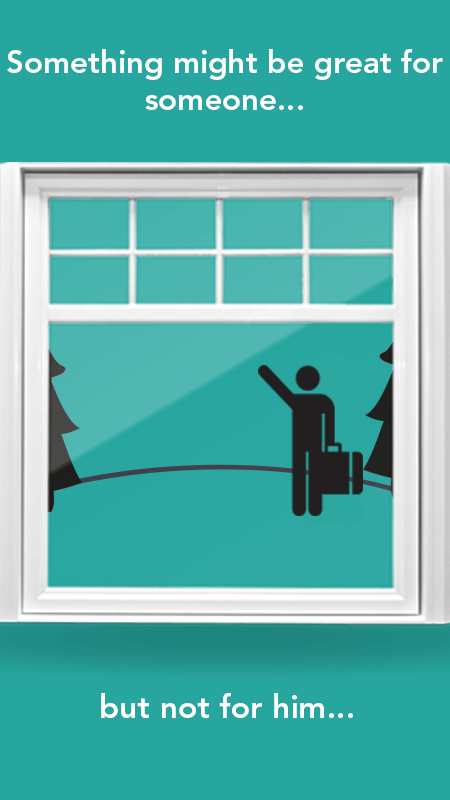
<style>
.page{position:relative;width:450px;height:800px;background:#27a69f}
.page>*{position:absolute;margin:0}
.t1{font:31.1px "AvenirLTStd-Heavy";color:#ffffff}
.t2{font:32px "AvenirLTStd-Heavy";color:#ffffff}
</style>
<div class="page">
<p class="t1" style="left:7px;top:49px;width:436px;height:61px;text-align:center">Something might be great for<br>someone...</p>
<p class="t2" style="left:101px;top:693px;width:252px;height:25px">but not for him...</p>
</div>
